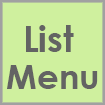
<style>
.page{position:relative;width:105px;height:105px;background:#cff09e}
.page>*{position:absolute;margin:0}
.t1{font:35.6px "CenturyGothic-Bold";color:#636363}
.t2{font:34.4px "CenturyGothic-Bold";color:#636363}
.t3{font:39.4px "CenturyGothic-Bold";color:#636363}
</style>
<div class="page">
<p class="t1" style="left:26px;top:25px;width:48px;height:27px">List</p>
<p class="t2" style="left:7px;top:65px;width:91px;height:24px"><span class="t3"> <br></span>Menu</p>
</div>
